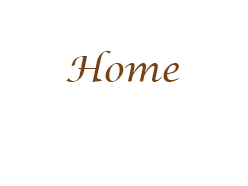
<style>
.page{position:relative;width:248px;height:186px;background:#ffffff}
.page>*{position:absolute;margin:0}
.t1{font:36px "LucidaCalligraphy-Italic";color:#774311}
</style>
<div class="page">
<p class="t1" style="left:66px;top:51px;width:113px;height:31px">Home</p>
</div>
